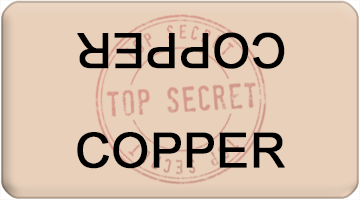
<style>
.page{position:relative;width:360px;height:200px;background:#e8d0bb}
.page>*{position:absolute;margin:0}
.t1{font:48px "ArialMT";color:#000000;font-weight:bold}
</style>
<div class="page">
<p class="t1" style="left:77px;top:32px;width:208px;height:37px;rotate:180deg">COPPER</p>
<p class="t1" style="left:77px;top:132px;width:208px;height:37px">COPPER</p>
</div>
